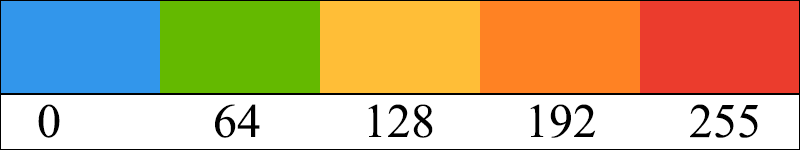
<style>
.page{position:relative;width:800px;height:150px;background:#ffffff}
.page>*{position:absolute;margin:0}
.t1{font:48px "TimesNewRomanPSMT";color:#000000}
.t2{font:48.3px "TimesNewRomanPSMT";color:#000000}
</style>
<div class="page">
<p class="t1" style="left:38px;top:104px;width:22px;height:34px">0</p>
<p class="t1" style="left:215px;top:104px;width:45px;height:34px">64</p>
<p class="t1" style="left:368px;top:104px;width:65px;height:34px">128</p>
<p class="t1" style="left:530px;top:104px;width:66px;height:34px">192</p>
<p class="t2" style="left:690px;top:104px;width:68px;height:34px">255</p>
</div>
